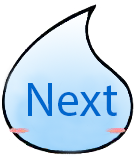
<style>
.page{position:relative;width:136px;height:158px;background:#ffffff}
.page>*{position:absolute;margin:0}
.t1{font:48px "MyriadPro-Regular";color:#0066cc}
</style>
<div class="page">
<p class="t1" style="left:28px;top:83px;width:89px;height:33px">Next</p>
</div>
